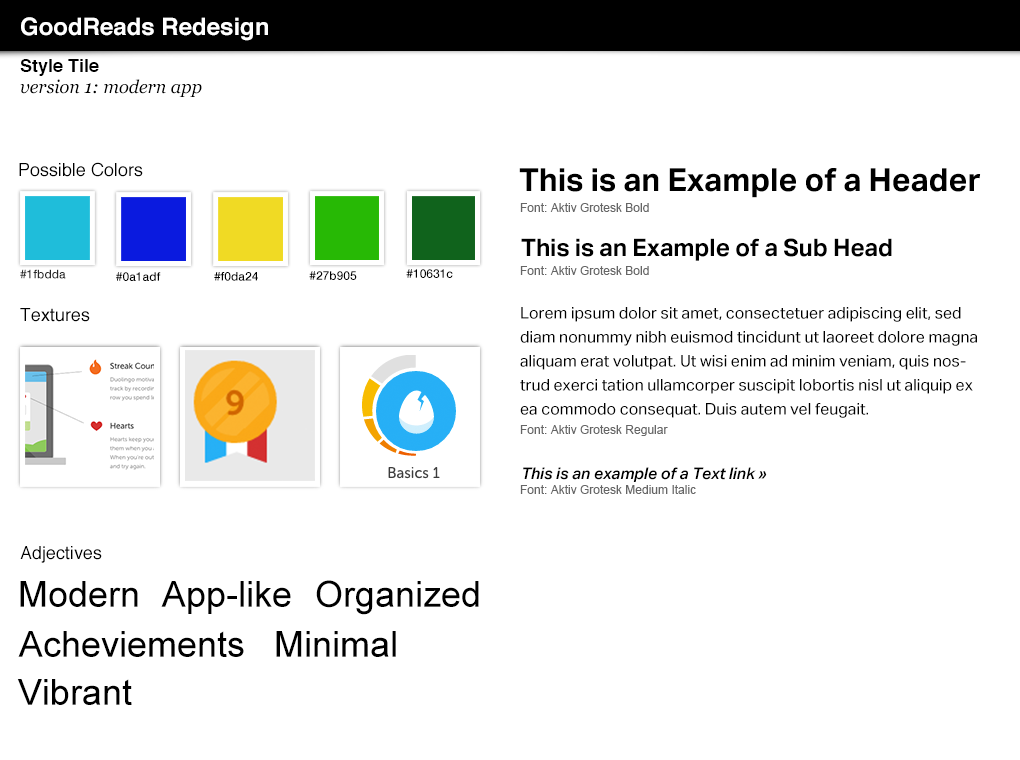
<style>
.page{position:relative;width:1020px;height:760px;background:#ffffff}
.page>*{position:absolute;margin:0}
.t1{font:24px "Helvetica-Bold";color:#ffffff}
.t2{font:18px "Helvetica-Bold";color:#000000}
.t3{font:18px "Georgia-Italic";color:#000000}
.t4{font:18px "Helvetica";color:#000000}
.t5{font:32px "AktivGrotesk-Bold";color:#000000}
.t6{font:12px "ArialMT";color:#666666}
.t7{font:24px "AktivGrotesk-Bold";color:#000000}
.t8{font:12px "HelveticaNeue-Medium";color:#282828}
.t9{font:12px "HelveticaNeue-Medium";color:#000000}
.t10{font:16px/24px "AktivGrotesk-Regular";color:#000000}
.t11{font:16px "AktivGrotesk-MediumItalic";color:#000000}
.t12{font:36px "ArialMT";color:#000000}
</style>
<div class="page">
<p class="t1" style="left:21px;top:17px;width:247px;height:24px">GoodReads Redesign</p>
<p class="t2" style="left:20px;top:59px;width:79px;height:17px">Style Tile</p>
<p class="t3" style="left:20px;top:79px;width:182px;height:18px">version 1: modern app</p>
<p class="t4" style="left:19px;top:162px;width:124px;height:15px">Possible Colors</p>
<p class="t5" style="left:519px;top:168px;width:462px;height:30px">This is an Example of a Header</p>
<p class="t6" style="left:520px;top:203px;width:129px;height:9px">Font: Aktiv Grotesk Bold</p>
<p class="t7" style="left:521px;top:238px;width:371px;height:23px">This is an Example of a Sub Head</p>
<p class="t8" style="left:20px;top:269px;width:46px;height:10px">#1fbdda</p>
<p class="t9" style="left:406px;top:269px;width:47px;height:9px">#10631c</p>
<p class="t6" style="left:520px;top:266px;width:129px;height:9px">Font: Aktiv Grotesk Bold</p>
<p class="t9" style="left:116px;top:272px;width:45px;height:9px">#0a1adf</p>
<p class="t9" style="left:214px;top:272px;width:44px;height:9px">#f0da24</p>
<p class="t9" style="left:309px;top:271px;width:48px;height:9px">#27b905</p>
<p class="t4" style="left:20px;top:308px;width:70px;height:14px">Textures</p>
<p class="t10" style="left:520px;top:307px;width:457px;height:111px">Lorem ipsum dolor sit amet, consectetuer adipiscing elit, sed diam nonummy nibh euismod tincidunt ut laoreet dolore magna aliquam erat volutpat. Ut wisi enim ad minim veniam, quis nostrud exerci tation ullamcorper suscipit lobortis nisl ut aliquip ex ea commodo consequat. Duis autem vel feugait.</p>
<p class="t6" style="left:520px;top:425px;width:148px;height:11px">Font: Aktiv Grotesk Regular</p>
<p class="t11" style="left:523px;top:467px;width:244px;height:15px">This is an example of a Text link »</p>
<p class="t6" style="left:520px;top:485px;width:176px;height:9px">Font: Aktiv Grotesk Medium Italic</p>
<p class="t4" style="left:20px;top:546px;width:82px;height:17px">Adjectives</p>
<p class="t12" style="left:20px;top:581px;width:118px;height:26px">Modern</p>
<p class="t12" style="left:161px;top:581px;width:130px;height:33px">App-like</p>
<p class="t12" style="left:316px;top:580px;width:163px;height:35px">Organized</p>
<p class="t12" style="left:18px;top:631px;width:226px;height:26px">Acheviements</p>
<p class="t12" style="left:276px;top:631px;width:120px;height:26px">Minimal</p>
<p class="t12" style="left:17px;top:679px;width:115px;height:26px">Vibrant</p>
</div>
